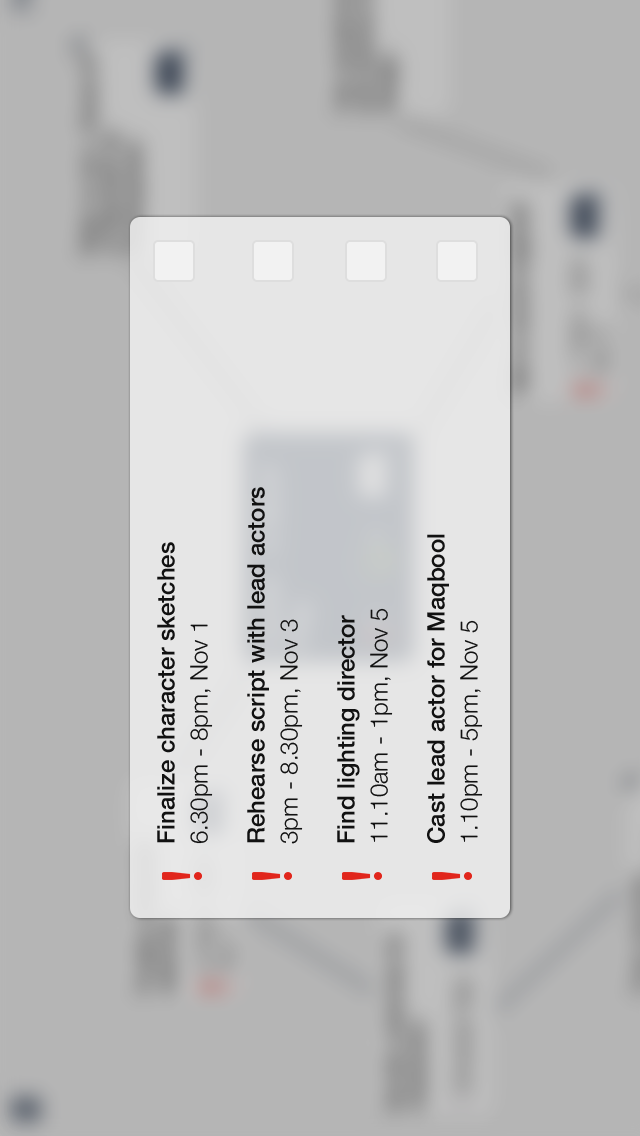
<style>
.page{position:relative;width:640px;height:1136px;background:#b5b5b5}
.page>*{position:absolute;margin:0}
.t1{font:24px "HelveticaNeue-Medium";color:#111111}
.t2{font:24px "HelveticaNeue-Light";color:#111111}
</style>
<div class="page">
<p class="t1" style="left:247px;top:487px;width:22px;height:356px;rotate:-90deg">Rehearse script with lead actors</p>
<p class="t1" style="left:427px;top:534px;width:22px;height:309px;rotate:-90deg">Cast lead actor for Maqbool</p>
<p class="t1" style="left:157px;top:542px;width:18px;height:301px;rotate:-90deg">Finalize character sketches</p>
<p class="t1" style="left:337px;top:615px;width:23px;height:228px;rotate:-90deg">Find lighting director</p>
<p class="t2" style="left:370px;top:608px;width:23px;height:234px;rotate:-90deg">11.10am - 1pm, Nov 5</p>
<p class="t2" style="left:190px;top:624px;width:23px;height:220px;rotate:-90deg">6.30pm - 8pm, Nov 1</p>
<p class="t2" style="left:280px;top:619px;width:23px;height:225px;rotate:-90deg">3pm - 8.30pm, Nov 3</p>
<p class="t2" style="left:460px;top:620px;width:23px;height:222px;rotate:-90deg">1.10pm - 5pm, Nov 5</p>
</div>
